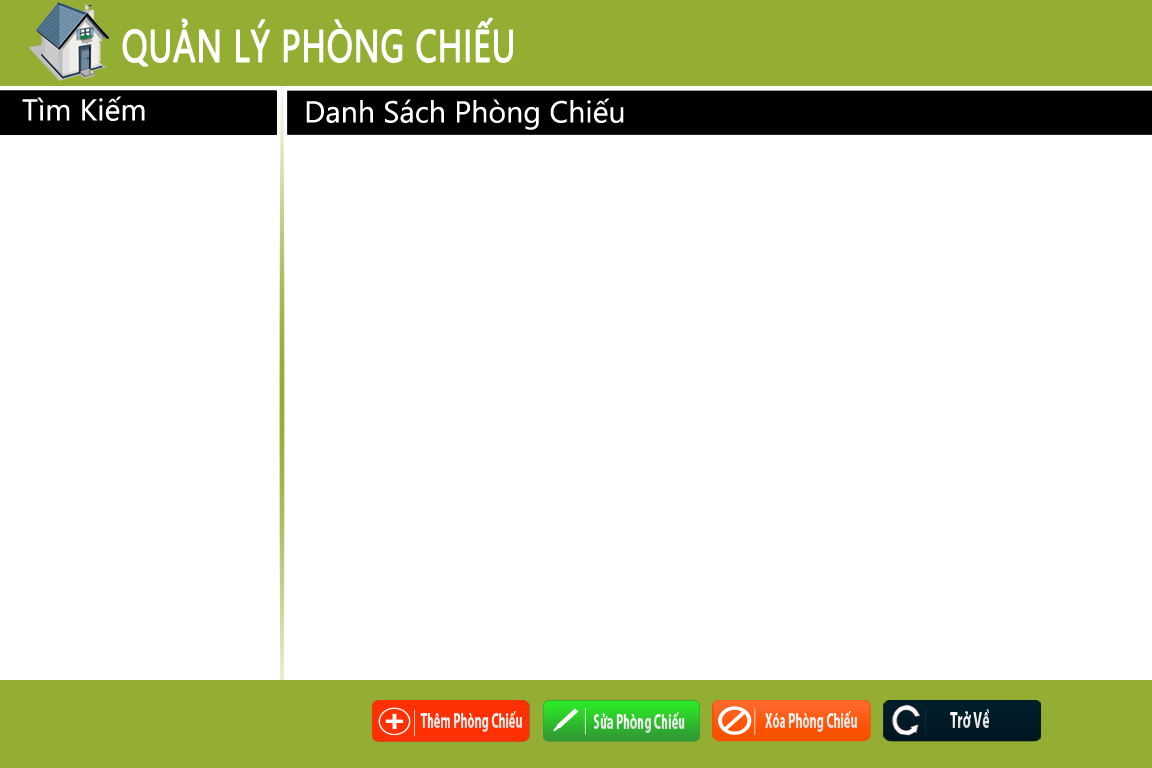
<style>
.page{position:relative;width:1152px;height:768px;background:#ffffff}
.page>*{position:absolute;margin:0}
.t1{font:45px "SegoeUI";color:#ffffff;text-transform:uppercase;font-weight:bold;scale:0.77 1}
.t2{font:30.3px "SegoeUI";color:#ffffff}
.t3{font:21px "MyriadPro-Bold";color:#ffffff;scale:0.58 1}
.t4{font:23.2px "MyriadPro-Bold";color:#e8e8e8;scale:0.59 1}
</style>
<div class="page">
<p class="t1" style="left:122px;top:17px;width:391px;height:50px">QUẢN LÝ PHÒNG CHIẾU</p>
<p class="t2" style="left:22px;top:96px;width:123px;height:25px">Tìm Kiếm</p>
<p class="t2" style="left:306px;top:98px;width:318px;height:32px">Danh Sách Phòng Chiếu</p>
<p class="t3" style="left:420px;top:711px;width:102px;height:21px">Thêm Phòng Chiếu</p>
<p class="t3" style="left:593px;top:712px;width:92px;height:21px">Sửa Phòng Chiếu</p>
<p class="t3" style="left:765px;top:711px;width:92px;height:21px">Xóa Phòng Chiếu</p>
<p class="t4" style="left:950px;top:709px;width:40px;height:19px">Trở Về</p>
</div>
